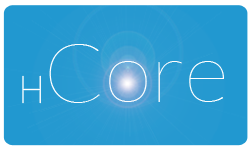
<style>
.page{position:relative;width:250px;height:150px;background:#2198d0}
.page>*{position:absolute;margin:0}
.t1{font:82.1px "Lato-Hairline";color:#ffffff;scale:1.05 1}
.t2{font:38px "Roboto-Thin";color:#ffffff;scale:0.95 1}
</style>
<div class="page">
<p class="t1" style="left:49px;top:44px;width:175px;height:59px">Core</p>
<p class="t2" style="left:22px;top:75px;width:19px;height:29px">H</p>
</div>
